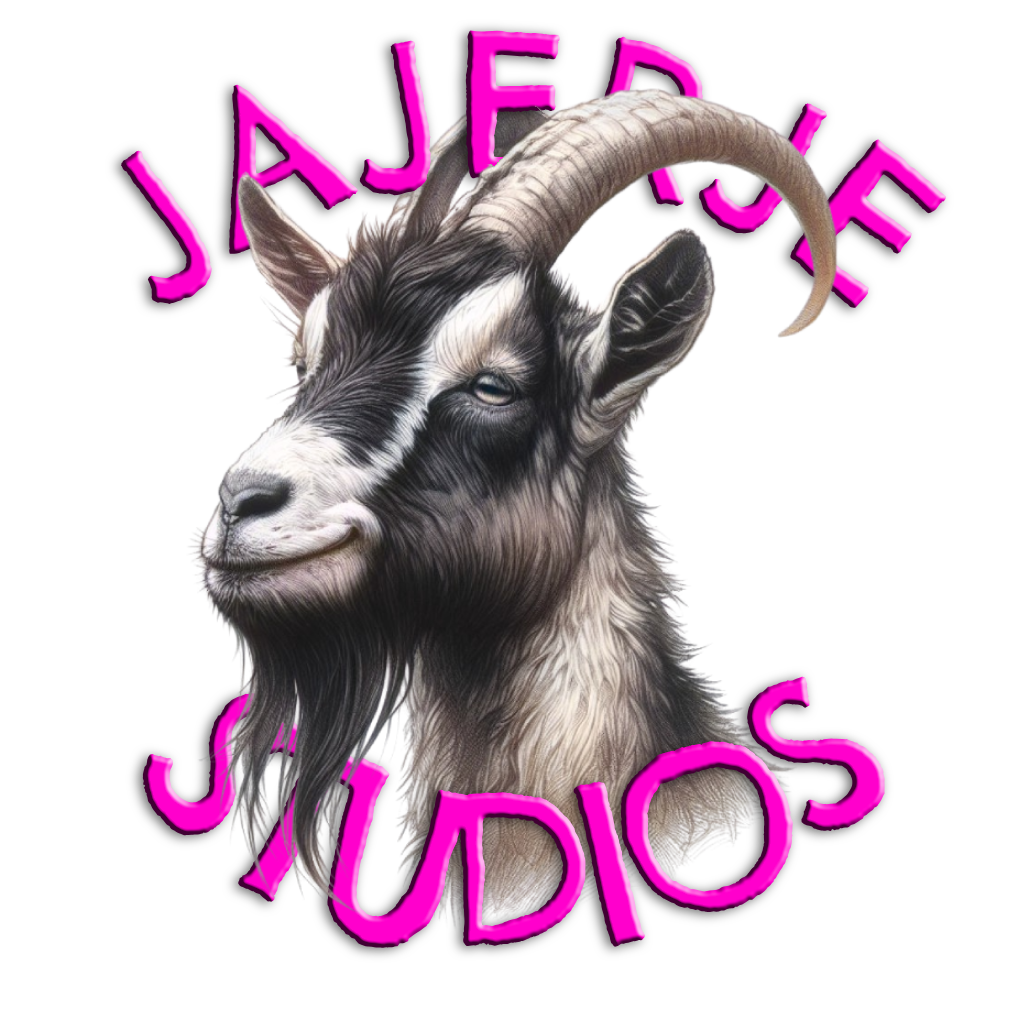
<style>
.page{position:relative;width:1024px;height:1024px;background:#ffffff}
.page>*{position:absolute;margin:0}
.t1{font:200px "ChelseaMarket-Regular"}
.t2{font:220px "ChelseaMarket-Regular"}
</style>
<div class="page">
<p class="t1" style="left:120px;top:30px;width:826px;height:278px">JAJERJE</p>
<p class="t2" style="left:142px;top:676px;width:743px;height:272px">STUDIOS</p>
</div>
